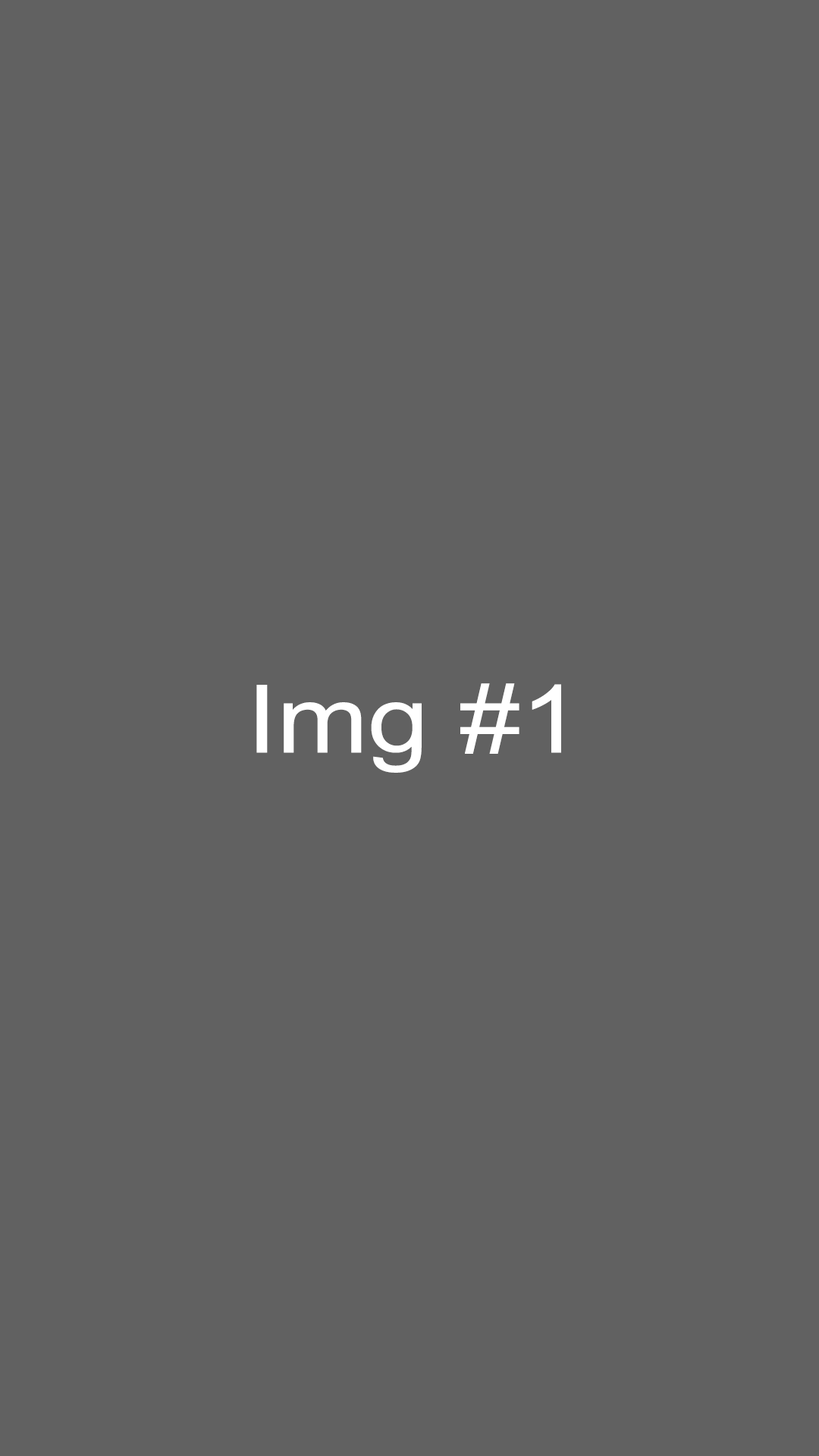
<style>
.page{position:relative;width:819px;height:1456px;background:#616161}
.page>*{position:absolute;margin:0}
.t1{font:94.8px "ArialNarrow";color:#ffffff;scale:1.41 1}
</style>
<div class="page">
<p class="t1" style="left:256px;top:683px;width:305px;height:90px">Img #1</p>
</div>
